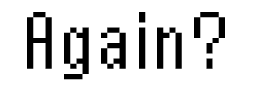
<style>
.page{position:relative;width:253px;height:92px;background:#ffffff}
.page>*{position:absolute;margin:0}
.t1{font:82.5px "ReturnOfGanonReg";color:#000000;scale:1.2 1}
</style>
<div class="page">
<p class="t1" style="left:27px;top:12px;width:198px;height:68px">Again?</p>
</div>
